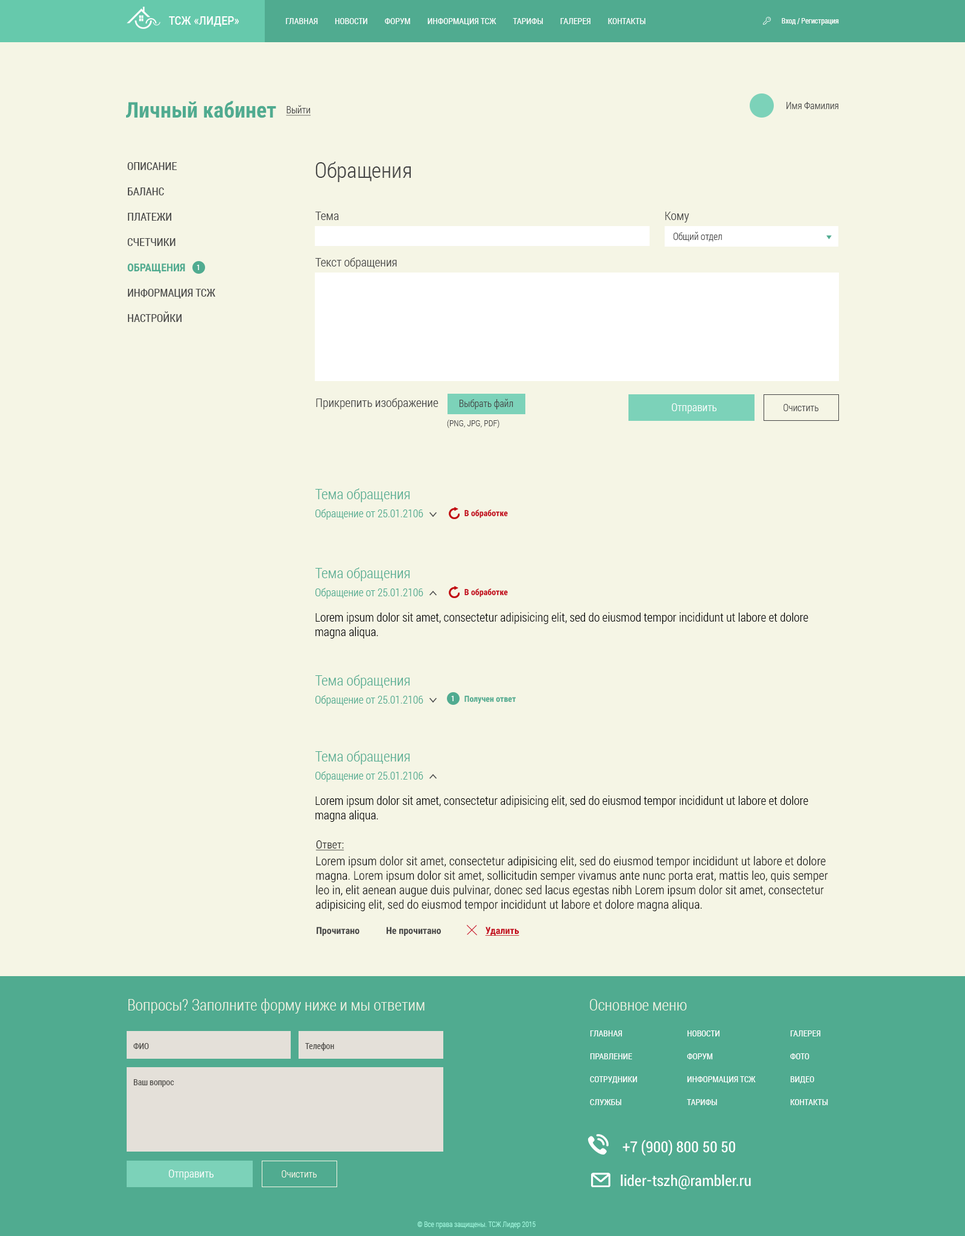
<style>
.page{position:relative;width:965px;height:1236px;background:#f5f5e5}
.page>*{position:absolute;margin:0}
.t1{font:12.1px "RobotoCondensed-Regular";letter-spacing:0.005em;color:#ffffff}
.t2{font:8.4px "RobotoCondensed-Regular";letter-spacing:0.005em;color:#ffffff}
.t3{font:7.2px "RobotoCondensed-Regular";color:#ffffff}
.t4{font:21.7px "RobotoCondensed-Bold";color:#50ab90}
.t5{font:9.6px "RobotoCondensed-Light";color:#454545}
.t6{font:9.6px "RobotoCondensed-Light";color:#454545;text-decoration:underline}
.t7{font:21.7px "RobotoCondensed-Light";color:#454545}
.t8{font:10.9px/25.3px "RobotoCondensed-Regular";color:#454545}
.t9{font:10.9px/25.3px "RobotoCondensed-Bold";color:#50ab90}
.t10{font:12.1px "RobotoCondensed-Light";color:#454545}
.t11{font:7.2px "RobotoCondensed-Regular";color:#fffefe}
.t12{font:10.9px "RobotoCondensed-Light";color:#ffffff}
.t13{font:8.4px "RobotoCondensed-Light";letter-spacing:0.005em;color:#454545}
.t14{font:10.9px/18.1px "RobotoCondensed-Light";color:#50ab90}
.t15{font:14.5px/18.1px "RobotoCondensed-Light";color:#50ab90}
.t16{font:8.4px "RobotoCondensed-Bold";color:#c20016}
.t17{font:12.1px/14.5px "RobotoCondensed-Light";color:#000000}
.t18{font:8.4px "RobotoCondensed-Bold";color:#50ab90}
.t19{font:10.9px "RobotoCondensed-Light";color:#000000;text-decoration:underline}
.t20{font:9.6px "RobotoCondensed-Bold";color:#454545}
.t21{font:9.6px "RobotoCondensed-Bold";color:#c20016;text-decoration:underline}
.t22{font:15.7px "RobotoCondensed-Light";color:#f5f5e5}
.t23{font:8.4px/22.9px "RobotoCondensed-Regular";color:#ffffff}
.t24{font:8.4px "RobotoCondensed-Regular";color:#4c4a46}
.t25{font:15.7px "Roboto-Condensed";color:#ffffff}
.t26{font:9.6px "RobotoCondensed-Light";color:#f5f5e5}
.t27{font:7.2px "RobotoCondensed-Light";color:#a6fde3}
</style>
<div class="page">
<p class="t1" style="left:169px;top:16px;width:70px;height:11px">ТСЖ «ЛИДЕР»</p>
<p class="t2" style="left:286px;top:18px;width:359px;height:7px">ГЛАВНАЯ         НОВОСТИ         ФОРУМ         ИНФОРМАЦИЯ ТСЖ         ТАРИФЫ         ГАЛЕРЕЯ         КОНТАКТЫ</p>
<p class="t3" style="left:781px;top:18px;width:58px;height:7px">Вход / Регистрация</p>
<p class="t4" style="left:126px;top:101px;width:150px;height:17px">Личный кабинет</p>
<p class="t5" style="left:786px;top:102px;width:52px;height:7px">Имя Фамилия</p>
<p class="t6" style="left:286px;top:105px;width:25px;height:11px">Выйти</p>
<p class="t7" style="left:315px;top:162px;width:96px;height:20px">Обращения</p>
<p class="t8" style="left:127px;top:162px;width:88px;height:160px">ОПИСАНИЕ<br>БАЛАНС<br>ПЛАТЕЖИ<br>СЧЕТЧИКИ<br><span class="t9">ОБРАЩЕНИЯ<br></span>ИНФОРМАЦИЯ ТСЖ<br>НАСТРОЙКИ</p>
<p class="t10" style="left:315px;top:212px;width:24px;height:8px">Тема</p>
<p class="t10" style="left:665px;top:212px;width:24px;height:10px">Кому</p>
<p class="t5" style="left:673px;top:232px;width:49px;height:10px">Общий отдел</p>
<p class="t10" style="left:315px;top:257px;width:82px;height:12px">Текст обращения</p>
<p class="t11" style="left:197px;top:265px;width:2px;height:5px">1</p>
<p class="t10" style="left:316px;top:398px;width:122px;height:11px">Прикрепить изображение</p>
<p class="t5" style="left:459px;top:399px;width:54px;height:10px">Выбрать файл</p>
<p class="t12" style="left:672px;top:403px;width:44px;height:11px">Отправить</p>
<p class="t5" style="left:783px;top:404px;width:35px;height:7px">Очистить</p>
<p class="t13" style="left:447px;top:420px;width:52px;height:8px">(PNG, JPG, PDF)</p>
<p class="t14" style="left:315px;top:488px;width:108px;height:32px"><span class="t15">Тема обращения<br></span>Обращение от 25.01.2106</p>
<p class="t16" style="left:464px;top:509px;width:44px;height:9px">В обработке</p>
<p class="t14" style="left:315px;top:567px;width:108px;height:32px"><span class="t15">Тема обращения<br></span>Обращение от 25.01.2106</p>
<p class="t16" style="left:464px;top:588px;width:44px;height:9px">В обработке</p>
<p class="t17" style="left:315px;top:612px;width:493px;height:27px">Lorem ipsum dolor sit amet, consectetur adipisicing elit, sed do eiusmod tempor incididunt ut labore et dolore magna aliqua.</p>
<p class="t14" style="left:315px;top:675px;width:108px;height:31px"><span class="t15">Тема обращения<br></span>Обращение от 25.01.2106</p>
<p class="t11" style="left:451px;top:696px;width:2px;height:5px">1</p>
<p class="t18" style="left:464px;top:695px;width:52px;height:9px">Получен ответ</p>
<p class="t14" style="left:315px;top:751px;width:108px;height:31px"><span class="t15">Тема обращения<br></span>Обращение от 25.01.2106</p>
<p class="t17" style="left:315px;top:795px;width:493px;height:27px">Lorem ipsum dolor sit amet, consectetur adipisicing elit, sed do eiusmod tempor incididunt ut labore et dolore magna aliqua.</p>
<p class="t19" style="left:315px;top:840px;width:29px;height:11px">Ответ:</p>
<p class="t17" style="left:315px;top:856px;width:513px;height:56px">Lorem ipsum dolor sit amet, consectetur adipisicing elit, sed do eiusmod tempor incididunt ut labore et dolore magna. Lorem ipsum dolor sit amet, sollicitudin semper vivamus ante nunc porta erat, mattis leo, quis semper leo in, elit aenean augue duis pulvinar, donec sed lacus egestas nibh Lorem ipsum dolor sit amet, consectetur adipisicing elit, sed do eiusmod tempor incididunt ut labore et dolore magna aliqua.</p>
<p class="t20" style="left:317px;top:927px;width:42px;height:9px">Прочитано</p>
<p class="t20" style="left:386px;top:927px;width:55px;height:9px">Не прочитано</p>
<p class="t21" style="left:485px;top:927px;width:34px;height:9px">Удалить</p>
<p class="t22" style="left:128px;top:998px;width:296px;height:16px">Вопросы? Заполните форму ниже и мы ответим</p>
<p class="t22" style="left:590px;top:999px;width:97px;height:12px">Основное меню</p>
<p class="t23" style="left:590px;top:1030px;width:47px;height:75px">ГЛАВНАЯ<br>ПРАВЛЕНИЕ<br>СОТРУДНИКИ<br>СЛУЖБЫ</p>
<p class="t23" style="left:687px;top:1030px;width:68px;height:75px">НОВОСТИ<br>ФОРУМ<br>ИНФОРМАЦИЯ ТСЖ<br>ТАРИФЫ</p>
<p class="t23" style="left:790px;top:1030px;width:38px;height:75px">ГАЛЕРЕЯ<br>ФОТО<br>ВИДЕО<br>КОНТАКТЫ</p>
<p class="t24" style="left:133px;top:1043px;width:16px;height:6px">ФИО</p>
<p class="t24" style="left:305px;top:1042px;width:29px;height:9px">Телефон</p>
<p class="t24" style="left:133px;top:1079px;width:41px;height:8px">Ваш вопрос</p>
<p class="t25" style="left:622px;top:1140px;width:113px;height:16px">+7 (900) 800 50 50</p>
<p class="t12" style="left:169px;top:1170px;width:44px;height:10px">Отправить</p>
<p class="t26" style="left:282px;top:1170px;width:35px;height:8px">Очистить</p>
<p class="t25" style="left:620px;top:1175px;width:131px;height:15px">lider-tszh@rambler.ru</p>
<p class="t27" style="left:417px;top:1222px;width:118px;height:7px">© Все права защищены. ТСЖ Лидер 2015</p>
</div>
